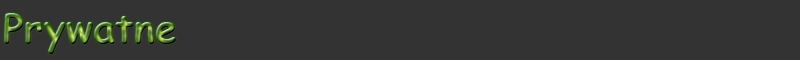
<style>
.page{position:relative;width:800px;height:60px;background:#333333}
.page>*{position:absolute;margin:0}
.t1{font:40px "ComicSansMS-Bold"}
</style>
<div class="page">
<p class="t1" style="left:4px;top:13px;width:172px;height:41px">Prywatne</p>
</div>
